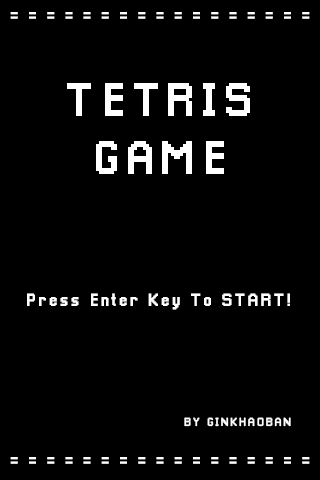
<style>
.page{position:relative;width:320px;height:480px;background:#000000}
.page>*{position:absolute;margin:0}
.t1{font:18px "Pixellari";letter-spacing:0.1em;color:#ffffff}
.t2{font:48px "Pixellari";letter-spacing:0.1em;color:#ffffff}
.t3{font:18.1px "Pixellari";letter-spacing:0.1em;color:#ffffff}
.t4{font:12px "Pixellari";letter-spacing:0.1em;color:#ffffff}
</style>
<div class="page">
<p class="t1" style="left:10px;top:12px;width:300px;height:7px">= = = = = = = = = = = = = = = = =</p>
<p class="t2" style="left:67px;top:83px;width:183px;height:91px;text-align:center">TETRIS <br>GAME</p>
<p class="t3" style="left:27px;top:293px;width:263px;height:17px">Press Enter Key To START!</p>
<p class="t4" style="left:184px;top:417px;width:107px;height:10px">BY GINKHAOBAN</p>
<p class="t1" style="left:10px;top:457px;width:300px;height:7px">= = = = = = = = = = = = = = = = =</p>
</div>
